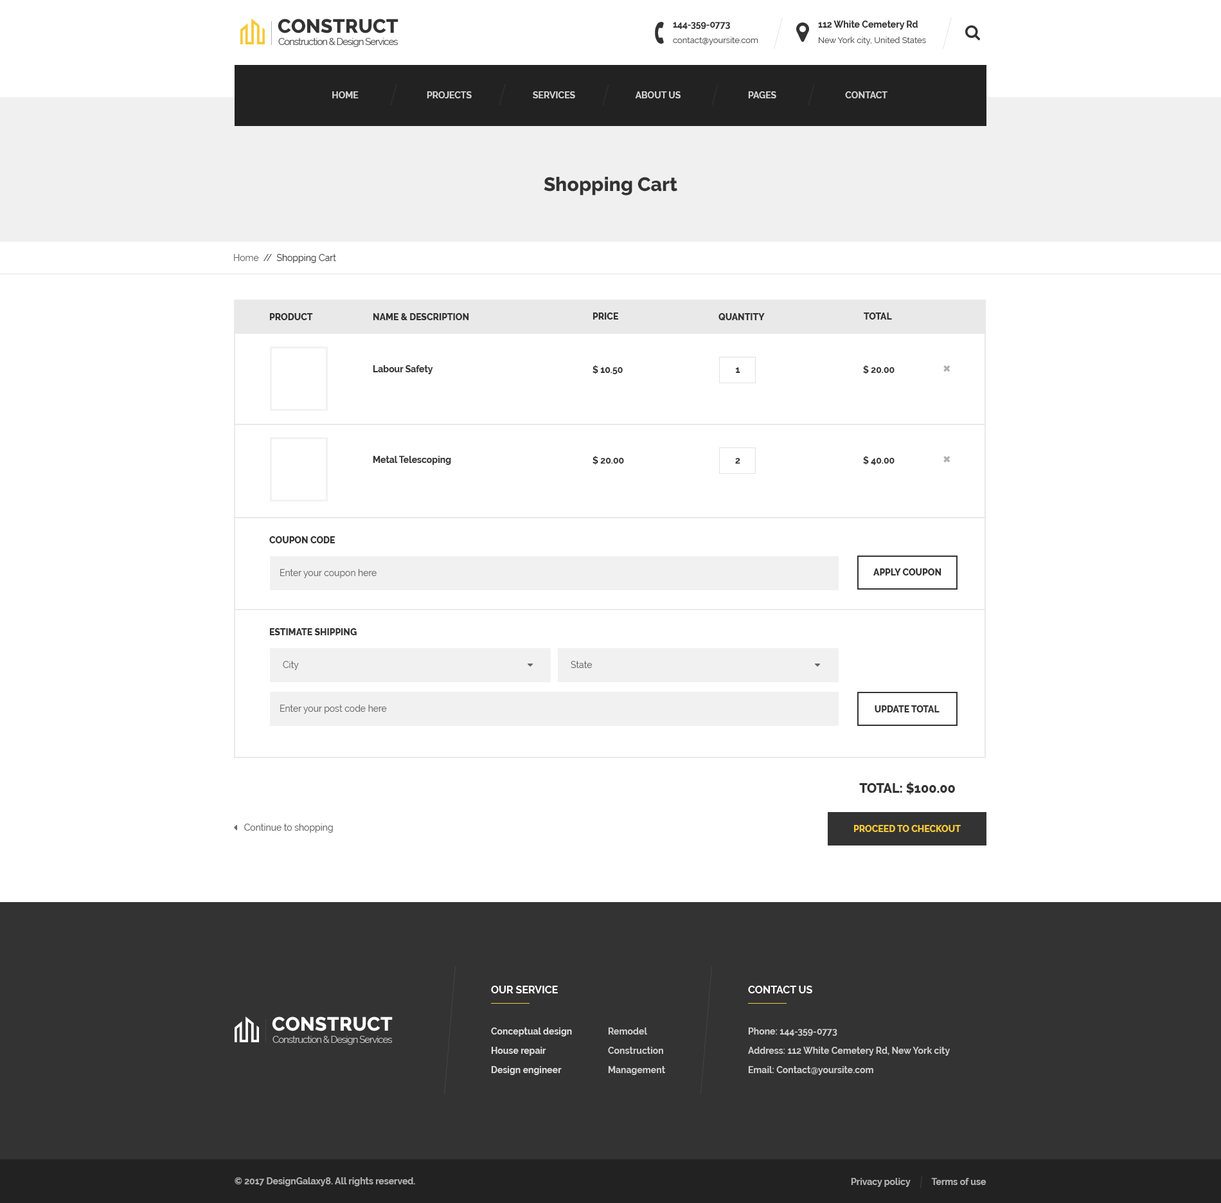
<style>
.page{position:relative;width:1221px;height:1203px;background:#ffffff}
.page>*{position:absolute;margin:0}
.t1{font:19.3px "Raleway-ExtraBold";letter-spacing:0.01em;color:#333333}
.t2{font:9px "Raleway-Bold";color:#333333}
.t3{font:9.6px "Raleway-Regular";letter-spacing:-0.07em;color:#555555}
.t4{font:8.4px "Raleway-Regular";color:#555555}
.t5{font:9px "Raleway-Bold";color:#d4d4d4;text-transform:uppercase}
.t6{font:19.3px "Raleway-ExtraBold";color:#333333}
.t7{font:9px "Raleway-Regular";color:#333333}
.t8{font:9px "Raleway-Regular";color:#666666}
.t9{font:9px "Raleway-ExtraBold";color:#333333;text-transform:uppercase}
.t10{font:9px "Raleway-Bold";color:#333333;text-transform:uppercase}
.t11{font:12.9px "Raleway-ExtraBold";color:#333333;text-transform:uppercase}
.t12{font:9px "Raleway-ExtraBold";color:#f6c93a;text-transform:uppercase}
.t13{font:10.3px "Raleway-Bold";color:#ffffff;text-transform:uppercase}
.t14{font:19.3px "Raleway-ExtraBold";letter-spacing:0.01em;color:#ffffff}
.t15{font:9.6px "Raleway-Regular";letter-spacing:-0.07em;color:#c5c5c5}
.t16{font:9px/19.3px "Raleway-Bold";color:#e1e1e1}
.t17{font:9px/19.3px "Raleway-Bold";color:#d0d0d0}
.t18{font:9px "Raleway-Bold";color:#b2b2b2}
</style>
<div class="page">
<p class="t1" style="left:278px;top:19px;width:121px;height:14px">CONSTRUCT</p>
<p class="t2" style="left:673px;top:22px;width:57px;height:7px">144-359-0773</p>
<p class="t2" style="left:818px;top:21px;width:101px;height:9px">112 White Cemetery Rd</p>
<p class="t3" style="left:278px;top:38px;width:121px;height:9px">Construction &amp; Design Services</p>
<p class="t4" style="left:673px;top:37px;width:86px;height:8px">contact@yoursite.com</p>
<p class="t4" style="left:819px;top:37px;width:107px;height:8px">New York city, United States</p>
<p class="t5" style="left:332px;top:91px;width:27px;height:7px">Home</p>
<p class="t5" style="left:427px;top:91px;width:45px;height:7px">Projects</p>
<p class="t5" style="left:533px;top:91px;width:42px;height:7px">Services</p>
<p class="t5" style="left:635px;top:91px;width:46px;height:7px">About Us</p>
<p class="t5" style="left:748px;top:91px;width:29px;height:7px">Pages</p>
<p class="t5" style="left:845px;top:91px;width:43px;height:7px">Contact</p>
<p class="t6" style="left:544px;top:177px;width:134px;height:18px">Shopping Cart</p>
<p class="t7" style="left:234px;top:254px;width:102px;height:9px"><span class="t8">Home</span>  //  Shopping Cart</p>
<p class="t9" style="left:270px;top:313px;width:43px;height:7px">Product</p>
<p class="t9" style="left:374px;top:313px;width:95px;height:7px">Name &amp; Description</p>
<p class="t9" style="left:593px;top:312px;width:25px;height:8px">Price</p>
<p class="t9" style="left:719px;top:313px;width:46px;height:7px">Quantity</p>
<p class="t9" style="left:864px;top:312px;width:28px;height:8px">Total</p>
<p class="t2" style="left:373px;top:365px;width:60px;height:9px">Labour Safety</p>
<p class="t10" style="left:593px;top:365px;width:30px;height:9px">$ 10.50</p>
<p class="t10" style="left:863px;top:365px;width:32px;height:9px">$ 20.00</p>
<p class="t2" style="left:736px;top:367px;width:5px;height:6px">1</p>
<p class="t2" style="left:373px;top:456px;width:78px;height:9px">Metal Telescoping</p>
<p class="t10" style="left:593px;top:456px;width:31px;height:9px">$ 20.00</p>
<p class="t2" style="left:735px;top:458px;width:6px;height:6px">2</p>
<p class="t10" style="left:863px;top:456px;width:32px;height:9px">$ 40.00</p>
<p class="t8" style="left:280px;top:569px;width:97px;height:9px">Enter your coupon here</p>
<p class="t9" style="left:874px;top:568px;width:68px;height:7px">Apply Coupon</p>
<p class="t8" style="left:280px;top:705px;width:107px;height:9px">Enter your post code here</p>
<p class="t9" style="left:875px;top:705px;width:65px;height:7px">Update Total</p>
<p class="t11" style="left:860px;top:782px;width:95px;height:13px">Total: $100.00</p>
<p class="t12" style="left:854px;top:825px;width:107px;height:7px">Proceed To Checkout</p>
<p class="t13" style="left:491px;top:986px;width:67px;height:7px">Our service</p>
<p class="t13" style="left:748px;top:986px;width:65px;height:7px">ContacT Us</p>
<p class="t14" style="left:272px;top:1016px;width:121px;height:15px">CONSTRUCT</p>
<p class="t15" style="left:273px;top:1036px;width:120px;height:9px">Construction &amp; Design Services</p>
<p class="t16" style="left:491px;top:1027px;width:81px;height:48px">Conceptual design<br>House repair<br>Design engineer</p>
<p class="t17" style="left:608px;top:1027px;width:57px;height:48px">Remodel<br>Construction<br>Management</p>
<p class="t17" style="left:748px;top:1027px;width:202px;height:48px">Phone: 144-359-0773<br>Address: 112 White Cemetery Rd, New York city<br>Email: Contact@yoursite.com</p>
<p class="t18" style="left:235px;top:1177px;width:180px;height:9px">© 2017 DesignGalaxy8. All rights reserved.</p>
<p class="t18" style="left:851px;top:1178px;width:136px;height:9px">Privacy policy          Terms of use</p>
</div>
